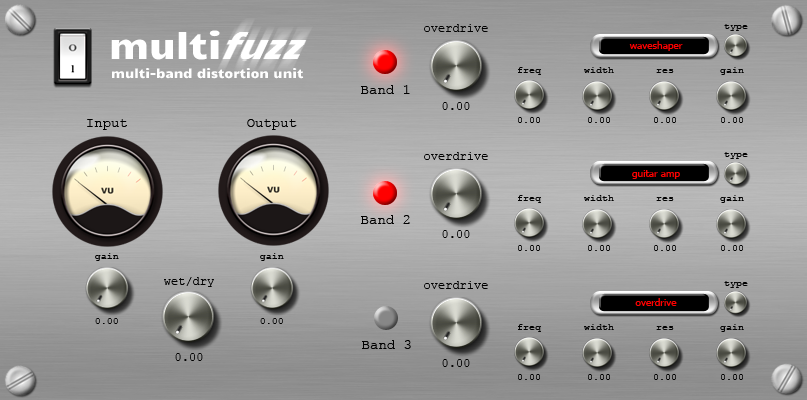
<style>
.page{position:relative;width:807px;height:400px}
.page>*{position:absolute;margin:0}
.t1{font:36px "Candal";color:#ffffff}
.t2{font:12px "CourierNewPSMT";color:#000000}
.t3{font:10px "CourierNewPSMT";color:#000000}
.t4{font:10px "Tahoma";color:#ff0000}
.t5{font:12.5px "Candal";color:#ffffff}
.t6{font:14px "CourierNewPSMT";color:#010101}
.t7{font:14px "CourierNewPSMT";color:#000000}
</style>
<div class="page">
<p class="t1" style="left:111px;top:30px;width:109px;height:30px">multi</p>
<p class="t2" style="left:424px;top:24px;width:64px;height:8px">overdrive</p>
<p class="t3" style="left:724px;top:24px;width:24px;height:7px">type</p>
<p class="t4" style="left:629px;top:41px;width:54px;height:10px">waveshaper</p>
<p class="t5" style="left:112px;top:68px;width:192px;height:11px">multi-band distortion unit</p>
<p class="t3" style="left:518px;top:67px;width:23px;height:8px">freq</p>
<p class="t3" style="left:584px;top:67px;width:30px;height:6px">width</p>
<p class="t3" style="left:656px;top:69px;width:18px;height:4px">res</p>
<p class="t3" style="left:720px;top:67px;width:24px;height:8px">gain</p>
<p class="t6" style="left:361px;top:85px;width:49px;height:9px">Band 1</p>
<p class="t2" style="left:442px;top:102px;width:28px;height:8px">0.00</p>
<p class="t7" style="left:87px;top:119px;width:40px;height:11px">Input</p>
<p class="t7" style="left:247px;top:119px;width:50px;height:11px">Output</p>
<p class="t3" style="left:518px;top:117px;width:22px;height:6px">0.00</p>
<p class="t3" style="left:588px;top:117px;width:22px;height:6px">0.00</p>
<p class="t3" style="left:654px;top:117px;width:22px;height:6px">0.00</p>
<p class="t3" style="left:721px;top:117px;width:22px;height:6px">0.00</p>
<p class="t2" style="left:424px;top:152px;width:64px;height:8px">overdrive</p>
<p class="t3" style="left:724px;top:152px;width:24px;height:7px">type</p>
<p class="t4" style="left:632px;top:170px;width:48px;height:9px">guitar amp</p>
<p class="t3" style="left:518px;top:195px;width:23px;height:8px">freq</p>
<p class="t3" style="left:584px;top:195px;width:30px;height:6px">width</p>
<p class="t3" style="left:656px;top:197px;width:18px;height:4px">res</p>
<p class="t3" style="left:720px;top:195px;width:24px;height:8px">gain</p>
<p class="t7" style="left:361px;top:215px;width:49px;height:9px">Band 2</p>
<p class="t2" style="left:442px;top:230px;width:28px;height:8px">0.00</p>
<p class="t3" style="left:518px;top:245px;width:22px;height:6px">0.00</p>
<p class="t3" style="left:588px;top:245px;width:22px;height:6px">0.00</p>
<p class="t3" style="left:654px;top:245px;width:22px;height:6px">0.00</p>
<p class="t3" style="left:721px;top:245px;width:22px;height:6px">0.00</p>
<p class="t3" style="left:95px;top:253px;width:24px;height:8px">gain</p>
<p class="t3" style="left:260px;top:253px;width:24px;height:8px">gain</p>
<p class="t2" style="left:424px;top:281px;width:64px;height:8px">overdrive</p>
<p class="t3" style="left:724px;top:281px;width:24px;height:7px">type</p>
<p class="t4" style="left:635px;top:298px;width:42px;height:8px">overdrive</p>
<p class="t3" style="left:95px;top:318px;width:23px;height:6px">0.00</p>
<p class="t3" style="left:260px;top:318px;width:23px;height:6px">0.00</p>
<p class="t3" style="left:518px;top:324px;width:23px;height:8px">freq</p>
<p class="t3" style="left:584px;top:324px;width:30px;height:6px">width</p>
<p class="t3" style="left:656px;top:326px;width:18px;height:4px">res</p>
<p class="t3" style="left:720px;top:324px;width:24px;height:8px">gain</p>
<p class="t7" style="left:362px;top:340px;width:49px;height:9px">Band 3</p>
<p class="t2" style="left:442px;top:359px;width:28px;height:8px">0.00</p>
<p class="t3" style="left:518px;top:374px;width:22px;height:6px">0.00</p>
<p class="t3" style="left:588px;top:374px;width:22px;height:6px">0.00</p>
<p class="t3" style="left:654px;top:374px;width:22px;height:6px">0.00</p>
<p class="t3" style="left:721px;top:374px;width:22px;height:6px">0.00</p>
</div>
